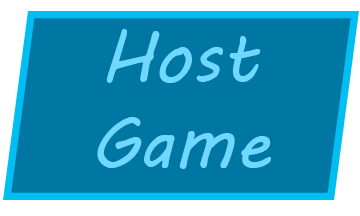
<style>
.page{position:relative;width:360px;height:216px;background:#0076a3}
.page>*{position:absolute;margin:0}
.t1{font:72px "MVBoli";color:#6ed9ff}
</style>
<div class="page">
<p class="t1" style="left:97px;top:29px;width:174px;height:140px;text-align:center">Host<br>Game</p>
</div>
